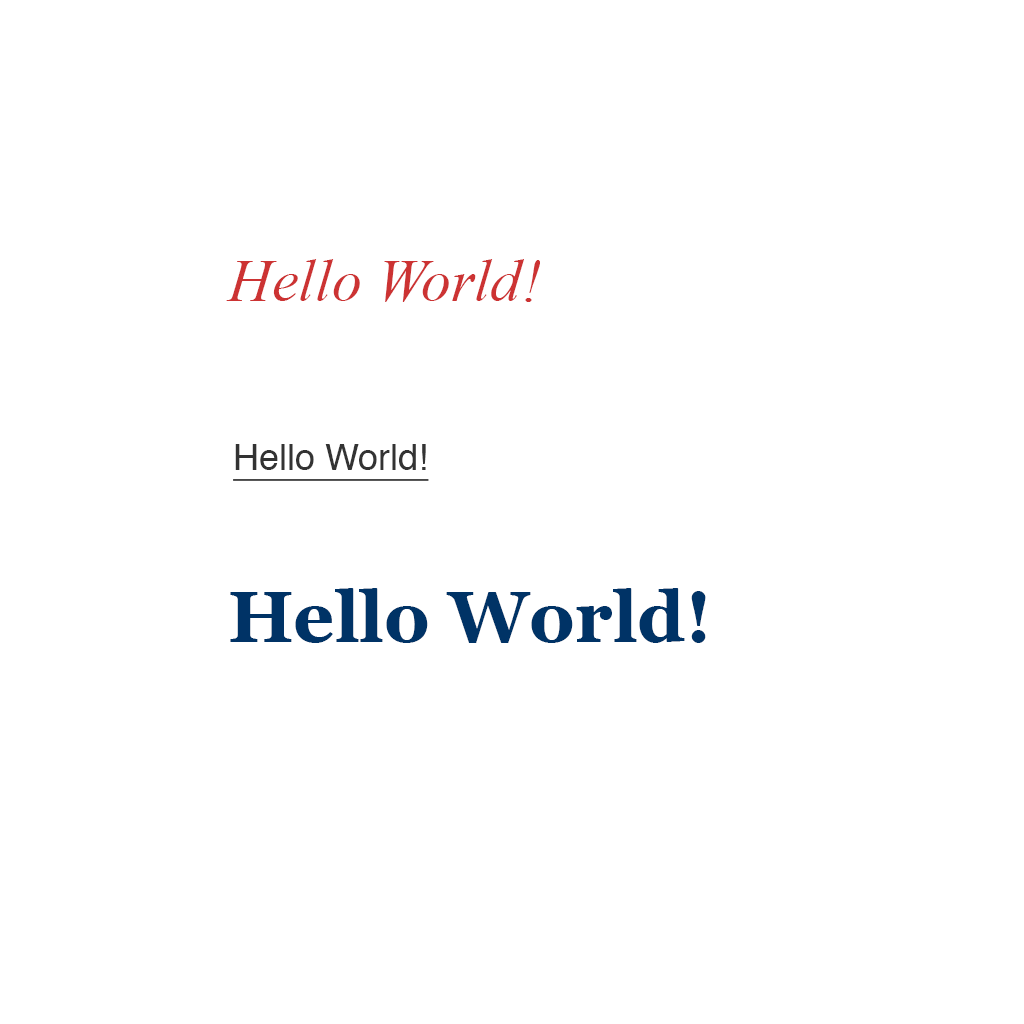
<style>
.page{position:relative;width:1024px;height:1024px;background:#ffffff}
.page>*{position:absolute;margin:0}
.t1{font:60px "TimesNewRomanPS-ItalicMT";color:#cc3333}
.t2{font:36px "Helvetica";color:#333333;text-decoration:underline}
.t3{font:72px "Georgia-Bold";color:#003366}
</style>
<div class="page">
<p class="t1" style="left:226px;top:259px;width:314px;height:43px">Hello World!</p>
<p class="t2" style="left:233px;top:444px;width:196px;height:37px">Hello World!</p>
<p class="t3" style="left:230px;top:588px;width:476px;height:55px">Hello World!</p>
</div>
